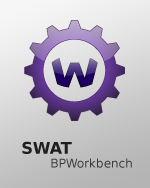
<style>
.page{position:relative;width:150px;height:188px}
.page>*{position:absolute;margin:0}
.t1{font:16px "BitstreamVeraSans-Bold";color:#1e1e1e}
.t2{font:12px "BitstreamVeraSans-Roman";color:#3b3b3b}
</style>
<div class="page">
<p class="t1" style="left:22px;top:141px;width:50px;height:13px">SWAT</p>
<p class="t2" style="left:51px;top:158px;width:81px;height:10px">BPWorkbench</p>
</div>
